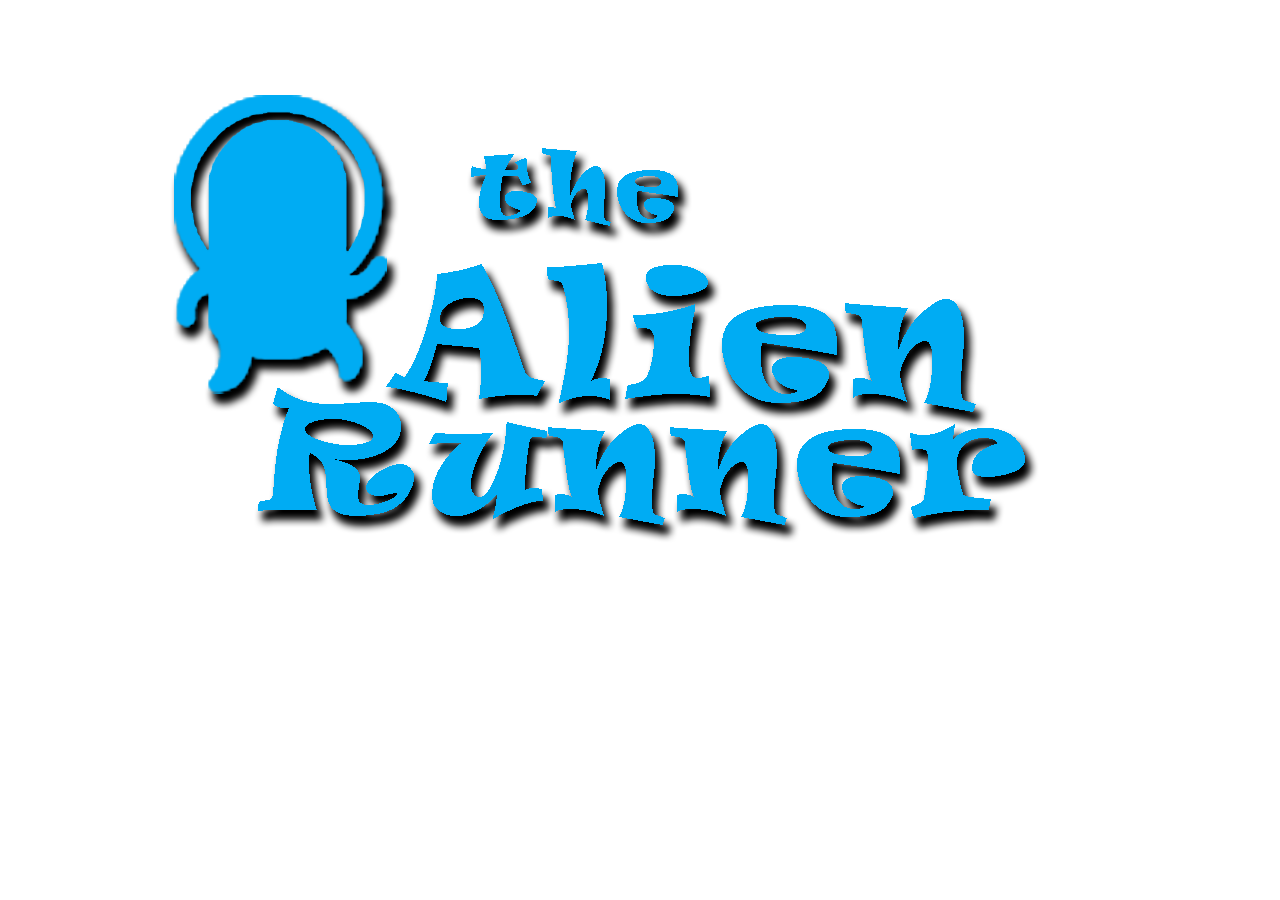
<style>
.page{position:relative;width:1280px;height:900px;background:#ffffff}
.page>*{position:absolute;margin:0}
.t1{font:86.7px "Ravie";letter-spacing:0.06em;color:#00acf3}
.t2{font:164.1px "Ravie";letter-spacing:0.06em;color:#00acf3}
.t3{font:147.7px "Ravie";letter-spacing:0.06em;color:#00acf3}
</style>
<div class="page">
<p class="t1" style="left:471px;top:148px;width:207px;height:78px">the</p>
<p class="t2" style="left:386px;top:263px;width:590px;height:149px">Alien</p>
<p class="t3" style="left:258px;top:388px;width:767px;height:137px">Runner</p>
</div>
